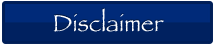
<style>
.page{position:relative;width:215px;height:45px;background:#002160}
.page>*{position:absolute;margin:0}
.t1{font:24px "Papyrus";color:#ffffff}
</style>
<div class="page">
<p class="t1" style="left:53px;top:8px;width:111px;height:24px">Disclaimer</p>
</div>
